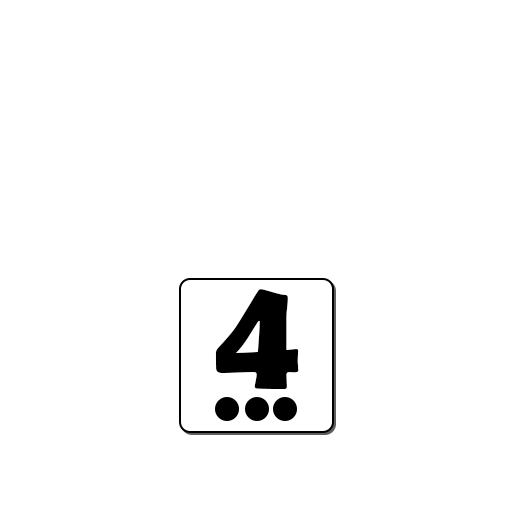
<style>
.page{position:relative;width:512px;height:512px;background:#ffffff}
.page>*{position:absolute;margin:0}
.t1{font:160px "BerlinSansFBDemi-Bold";color:#000000}
</style>
<div class="page">
<p class="t1" style="left:215px;top:289px;width:84px;height:100px">4</p>
</div>
